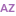
<style>
.page{position:relative;width:16px;height:16px;background:#ffffff}
.page>*{position:absolute;margin:0}
.t1{font:11px "Lato-Heavy";letter-spacing:0.16em;color:#a568b4}
</style>
<div class="page">
<p class="t1" style="left:0px;top:4px;width:8px;height:8px">A</p>
<p class="t1" style="left:8px;top:4px;width:7px;height:8px">Z</p>
</div>
